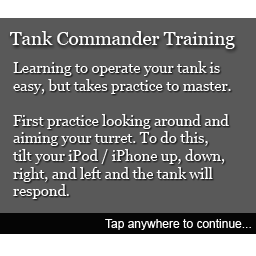
<style>
.page{position:relative;width:256px;height:256px;background:#595959}
.page>*{position:absolute;margin:0}
.t1{font:18.7px "Georgia";color:#fefefe}
.t2{font:14.7px "Georgia";color:#fefefe}
.t3{font:12px "ArialMT";color:#ffffff}
</style>
<div class="page">
<p class="t1" style="left:10px;top:31px;width:225px;height:18px">Tank Commander Training</p>
<p class="t2" style="left:12px;top:61px;width:219px;height:138px">Learning to operate your tank is<br>easy, but takes practice to master.<br><br>First practice looking around and<br>aiming your turret. To do this,<br>tilt your iPod / iPhone up, down,<br>right, and left and the tank will<br>respond.</p>
<p class="t3" style="left:105px;top:219px;width:146px;height:11px">Tap anywhere to continue...</p>
</div>
